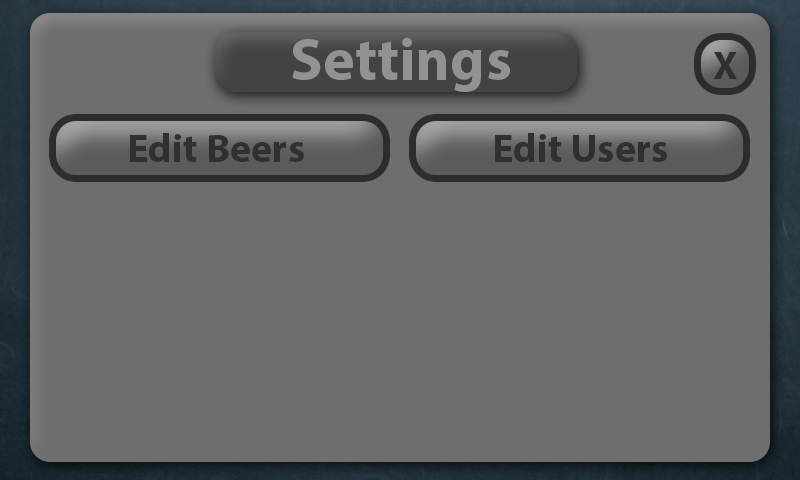
<style>
.page{position:relative;width:800px;height:480px;background:#6e6e6e}
.page>*{position:absolute;margin:0}
.t1{font:60px "MyriadPro-Bold";color:#939191}
.t2{font:40px "MyriadPro-Bold";color:#303030}
</style>
<div class="page">
<p class="t1" style="left:292px;top:37px;width:218px;height:55px">Settings</p>
<p class="t2" style="left:713px;top:52px;width:24px;height:27px">X</p>
<p class="t2" style="left:130px;top:133px;width:174px;height:29px">Edit Beers</p>
<p class="t2" style="left:495px;top:133px;width:172px;height:29px">Edit Users</p>
</div>
